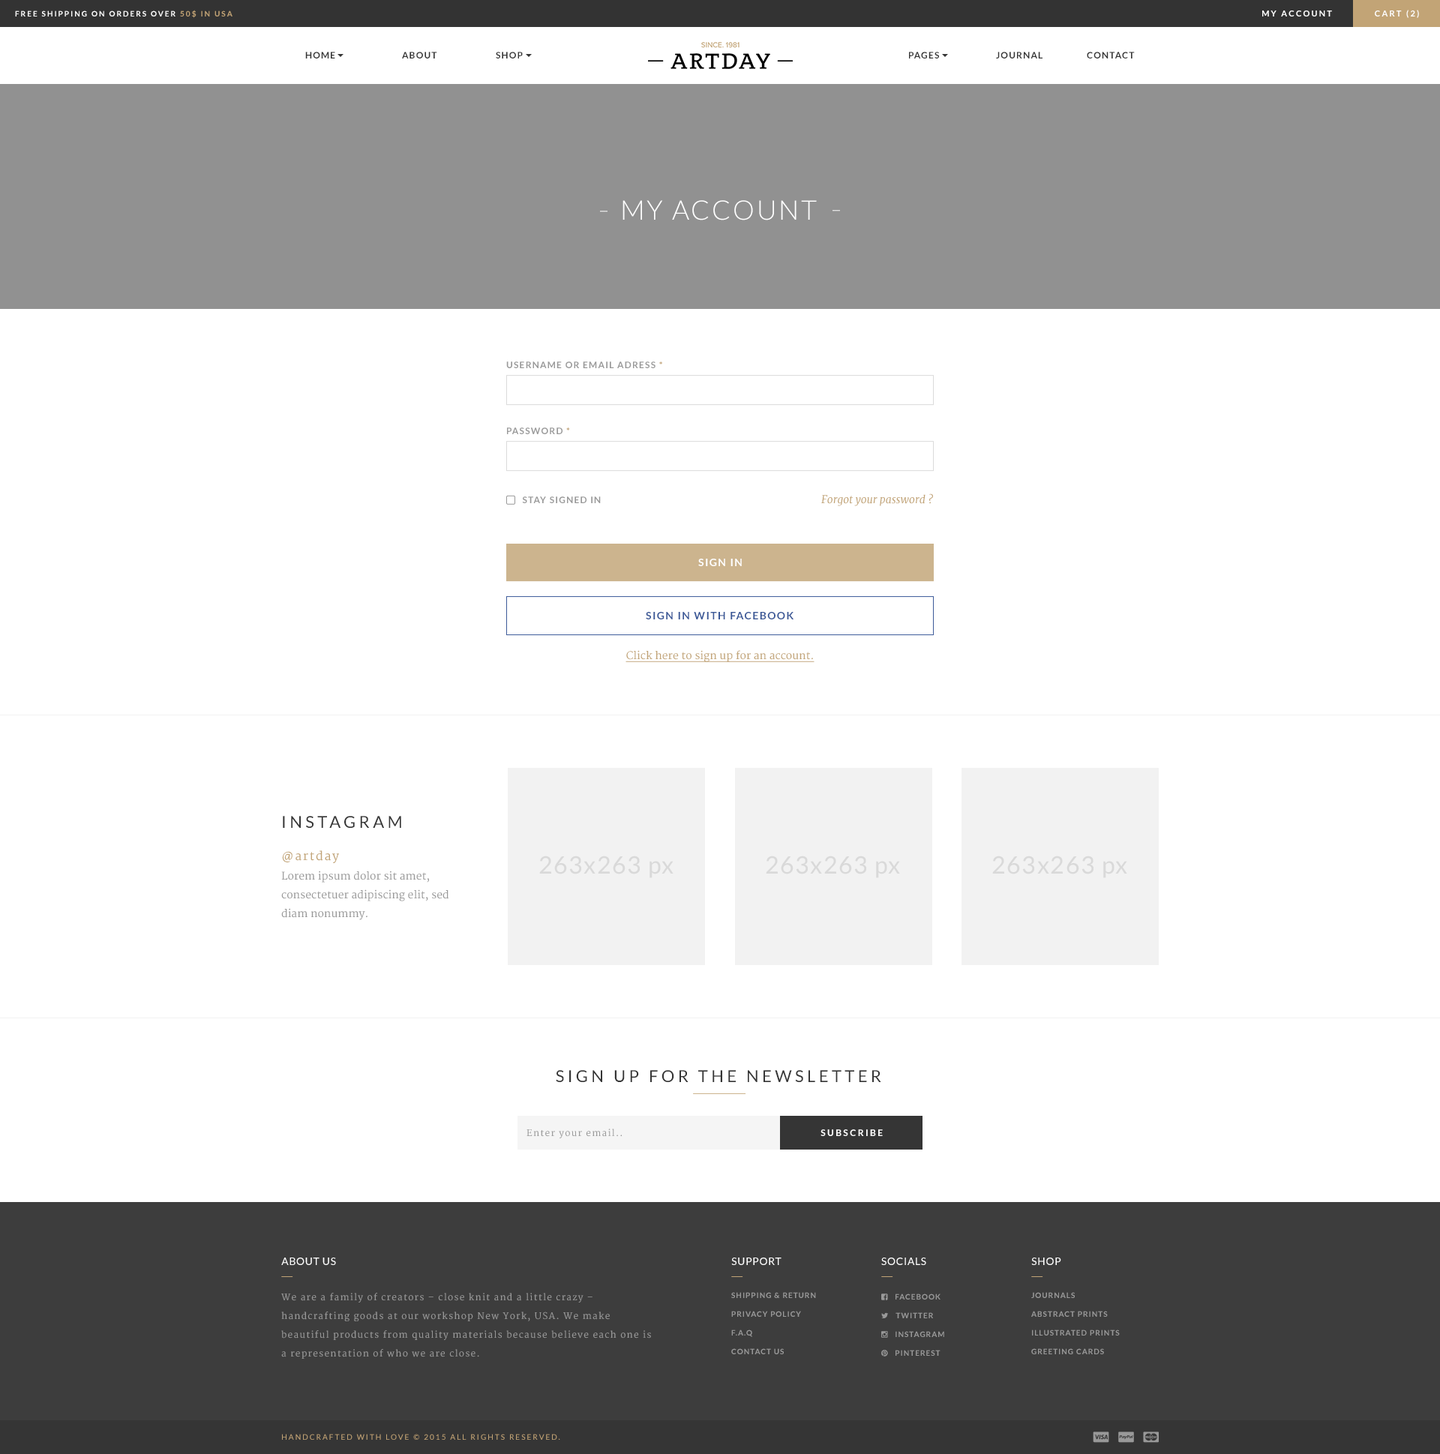
<style>
.page{position:relative;width:1440px;height:1454px;background:#ffffff}
.page>*{position:absolute;margin:0}
.t1{font:7.5px "Lato-Bold";letter-spacing:0.2em;color:#ffffff;text-transform:uppercase}
.t2{font:7.5px "Lato-Bold";letter-spacing:0.2em;color:#c2a476;text-transform:uppercase}
.t3{font:8.2px "Lato-Bold";letter-spacing:0.2em;color:#ffffff;text-transform:uppercase}
.t4{font:9px "Lato-Bold";letter-spacing:0.1em;color:#353535;text-transform:uppercase}
.t5{font:27px "Lato-Light";letter-spacing:0.075em;color:#ffffff;text-transform:uppercase}
.t6{font:9px "Lato-Bold";letter-spacing:0.1em;color:#999999;text-transform:uppercase}
.t7{font:9px "Lato-Bold";letter-spacing:0.1em;color:#c2a476;text-transform:uppercase}
.t8{font:10.5px "Merriweather-Italic";color:#c2a476}
.t9{font:10.5px "Lato-Bold";letter-spacing:0.1em;color:#ffffff;text-transform:uppercase}
.t10{font:10.5px "Lato-Bold";letter-spacing:0.1em;color:#3b5998;text-transform:uppercase}
.t11{font:10.5px "Merriweather";color:#c2a476;text-decoration:underline}
.t12{font:16.5px "Lato-Regular";letter-spacing:0.2em;color:#353535;text-transform:uppercase}
.t13{font:12px "Merriweather";letter-spacing:0.1em;color:#c2a476}
.t14{font:24px "Lato-Regular";letter-spacing:0.05em;color:#d9d9d9}
.t15{font:10.5px/18.7px "Merriweather";color:#999999}
.t16{font:16.4px "Lato-Regular";letter-spacing:0.2em;color:#353535;text-transform:uppercase}
.t17{font:9px "Merriweather";letter-spacing:0.1em;color:#999999}
.t18{font:9px "Lato-Bold";letter-spacing:0.2em;color:#ffffff;text-transform:uppercase}
.t19{font:10.6px "Lato-Regular";letter-spacing:0.05em;color:#ffffff;text-transform:uppercase}
.t20{font:9px/18.7px "Merriweather";letter-spacing:0.1em;color:#999999}
.t21{font:7.5px/18.7px "Lato-Bold";letter-spacing:0.1em;color:#999999;text-transform:uppercase}
.t22{font:7.5px "Lato-Regular";letter-spacing:0.2em;color:#c2a476;text-transform:uppercase}
</style>
<div class="page">
<p class="t1" style="left:15px;top:10px;width:217px;height:8px">FREE SHIPPING ON ORDERS OVER <span class="t2">50$ IN USA</span></p>
<p class="t3" style="left:1262px;top:10px;width:70px;height:6px">My account</p>
<p class="t3" style="left:1375px;top:10px;width:44px;height:8px">Cart (2)</p>
<p class="t4" style="left:305px;top:52px;width:30px;height:6px">Home</p>
<p class="t4" style="left:402px;top:52px;width:35px;height:6px">About</p>
<p class="t4" style="left:496px;top:52px;width:27px;height:6px">Shop</p>
<p class="t4" style="left:909px;top:52px;width:30px;height:6px">PAges</p>
<p class="t4" style="left:996px;top:52px;width:46px;height:6px">Journal</p>
<p class="t4" style="left:1087px;top:52px;width:48px;height:6px">Contact</p>
<p class="t5" style="left:622px;top:200px;width:195px;height:20px">MY ACCOUNT</p>
<p class="t6" style="left:506px;top:361px;width:156px;height:7px">USERNAME OR EMAIL ADRESS <span class="t7">*</span></p>
<p class="t6" style="left:507px;top:427px;width:63px;height:7px">PASSWORD <span class="t7">*</span></p>
<p class="t6" style="left:522px;top:496px;width:79px;height:7px">Stay signed in</p>
<p class="t8" style="left:821px;top:493px;width:112px;height:13px">Forgot your password ?</p>
<p class="t9" style="left:698px;top:559px;width:44px;height:7px">Sign in</p>
<p class="t9" style="left:698px;top:559px;width:44px;height:7px">Sign in</p>
<p class="t10" style="left:646px;top:612px;width:147px;height:7px">Sign in with Facebook</p>
<p class="t11" style="left:625px;top:650px;width:189px;height:12px">Click here to sign up for an account.</p>
<p class="t12" style="left:283px;top:816px;width:118px;height:12px">Instagram</p>
<p class="t13" style="left:282px;top:850px;width:57px;height:13px">@artday</p>
<p class="t14" style="left:539px;top:856px;width:134px;height:22px">263x263 px</p>
<p class="t14" style="left:766px;top:856px;width:134px;height:22px">263x263 px</p>
<p class="t14" style="left:992px;top:856px;width:135px;height:22px">263x263 px</p>
<p class="t15" style="left:281px;top:871px;width:168px;height:49px">Lorem ipsum dolor sit amet, consectetuer adipiscing elit, sed <br>diam nonummy.</p>
<p class="t16" style="left:556px;top:1070px;width:325px;height:12px">Sign up for the newsletter</p>
<p class="t17" style="left:526px;top:1129px;width:96px;height:9px">Enter your email..</p>
<p class="t18" style="left:820px;top:1129px;width:63px;height:7px">Subscribe</p>
<p class="t19" style="left:281px;top:1258px;width:55px;height:7px">About Us</p>
<p class="t19" style="left:731px;top:1258px;width:50px;height:7px">Support</p>
<p class="t19" style="left:881px;top:1258px;width:45px;height:7px">socials</p>
<p class="t19" style="left:1031px;top:1258px;width:30px;height:7px">Shop</p>
<p class="t20" style="left:281px;top:1293px;width:370px;height:66px">We are a family of creators – close knit and a little crazy – handcrafting goods at our workshop New York, USA. We make beautiful products from quality materials because believe each one is a representation of who we are close.</p>
<p class="t21" style="left:731px;top:1292px;width:85px;height:62px">SHIPPING &amp; RETURN<br>PRIVACY POLICY<br>F.A.Q<br>CONTACT US</p>
<p class="t21" style="left:1031px;top:1292px;width:89px;height:62px">JOURNALS<br>ABSTRACT PRINTS<br>ILLUSTRATED PRINTS<br>GREETING CARDS</p>
<p class="t22" style="left:282px;top:1434px;width:278px;height:6px">HANDCRAFTED WITH LOVE © 2015 ALL RIGHTS RESERVED.</p>
</div>
